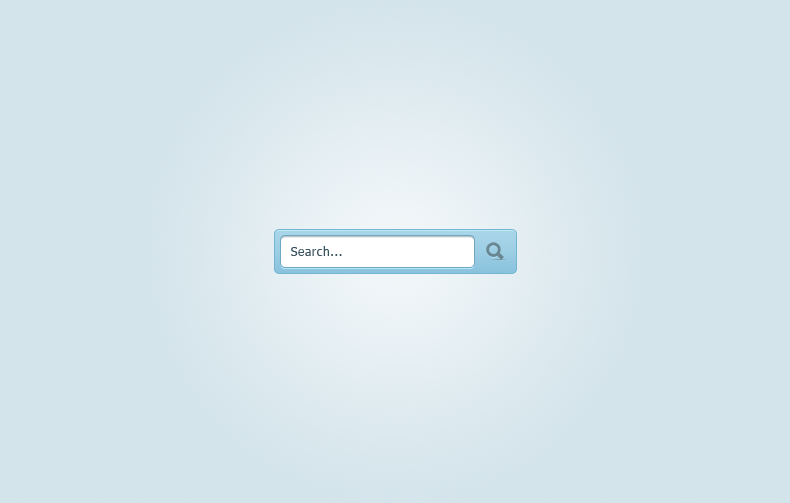
<style>
.page{position:relative;width:790px;height:503px;background:#d4e4eb}
.page>*{position:absolute;margin:0}
.t1{font:12px "Tahoma";letter-spacing:0.05em;color:#38525f}
</style>
<div class="page">
<p class="t1" style="left:291px;top:246px;width:51px;height:10px">Search...</p>
</div>
